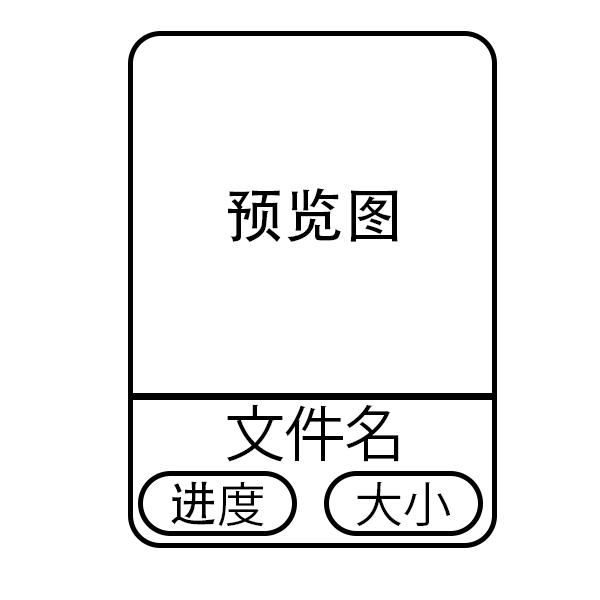
<style>
.page{position:relative;width:600px;height:600px;background:#ffffff}
.page>*{position:absolute;margin:0}
.t1{font:60px "AdobeHeitiStd-Regular";color:#000000}
.t2{font:60px "KozGoPr6N-Regular";color:#000000}
.t3{font:48px "AdobeHeitiStd-Regular";color:#000000}
.t4{font:48px "KozGoPr6N-Regular";color:#000000}
</style>
<div class="page">
<p class="t1" style="left:228px;top:188px;width:170px;height:54px">预览图</p>
<p class="t2" style="left:227px;top:404px;width:172px;height:58px">文件名</p>
<p class="t3" style="left:171px;top:481px;width:93px;height:46px">进<span class="t4">度</span></p>
<p class="t4" style="left:356px;top:482px;width:94px;height:45px">大小</p>
</div>
